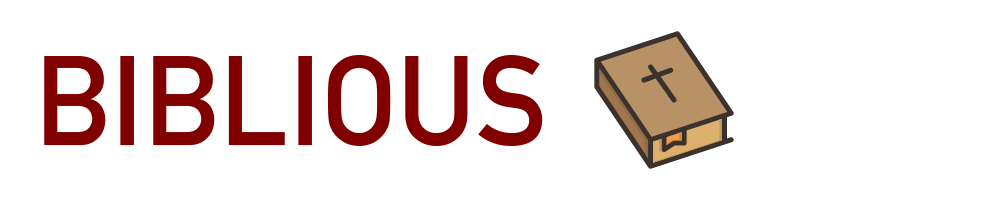
<style>
.page{position:relative;width:1000px;height:200px;background:#ffffff}
.page>*{position:absolute;margin:0}
.t1{font:125px "DINAlternate-Bold";color:#800000}
</style>
<div class="page">
<p class="t1" style="left:44px;top:55px;width:499px;height:91px">BIBLIOUS</p>
</div>
